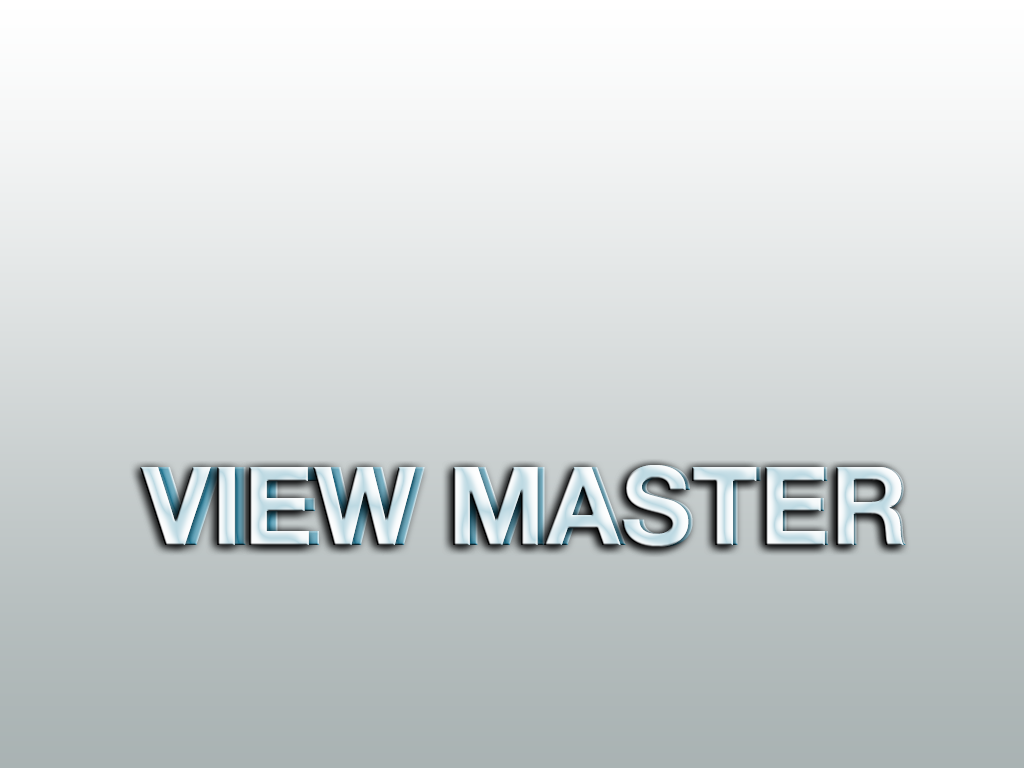
<style>
.page{position:relative;width:1024px;height:768px}
.page>*{position:absolute;margin:0}
.t1{font:109.3px "HelveticaNeue-Bold"}
</style>
<div class="page">
<p class="t1" style="left:140px;top:465px;width:764px;height:82px">VIEW MASTER</p>
<p class="t1" style="left:140px;top:465px;width:764px;height:82px">VIEW MASTER</p>
<p class="t1" style="left:152px;top:465px;width:754px;height:82px">VIEW MASTER</p>
</div>
